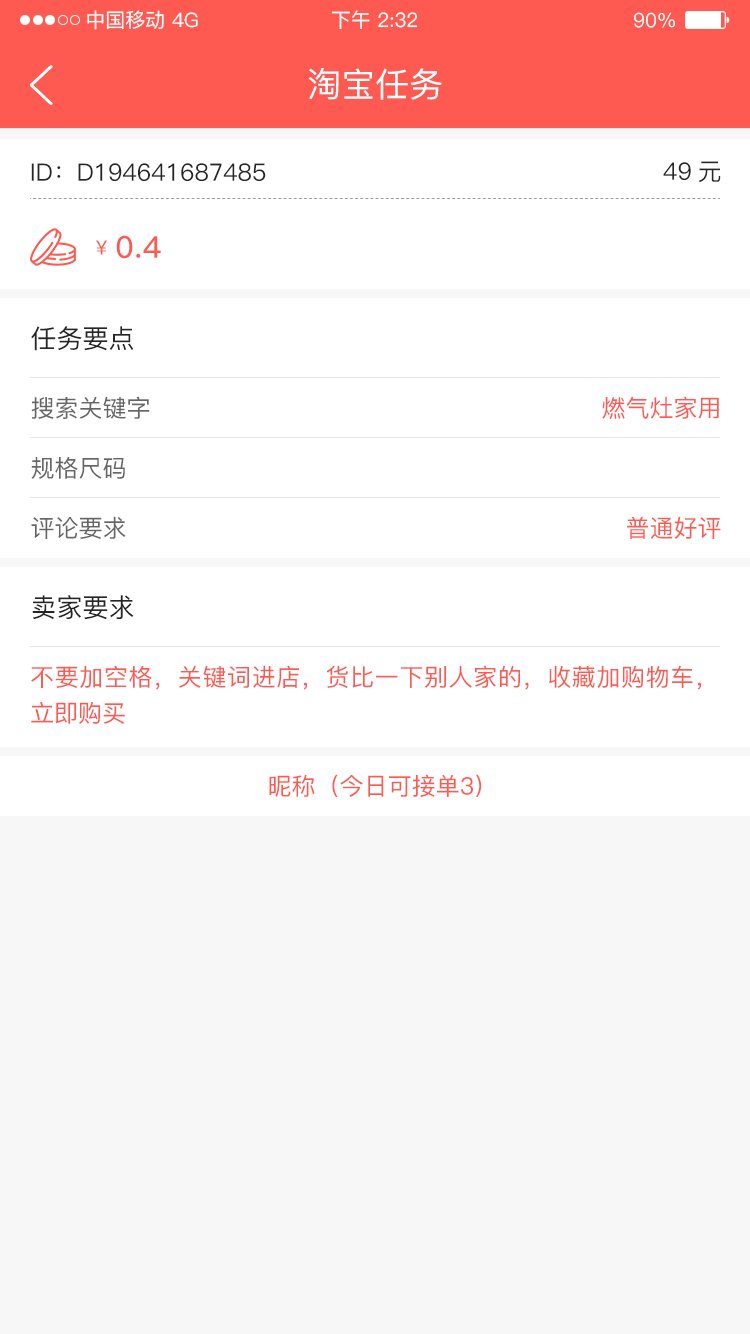
<style>
.page{position:relative;width:750px;height:1334px;background:#ffffff}
.page>*{position:absolute;margin:0}
.t1{font:20px "PingFang-SC-Medium";color:#ffffff}
.t2{font:34px "PingFang-SC-Medium";color:#ffffff}
.t3{font:24px "PingFang-SC-Medium";color:#262626}
.t4{font:19.8px "PingFang-SC-Medium";color:#fe5a51}
.t5{font:29.6px "PingFang-SC-Medium";color:#fe5a51;font-weight:bold}
.t6{font:26px "PingFang-SC-Medium";color:#262626}
.t7{font:24px "PingFang-SC-Medium";color:#666666}
.t8{font:24px "PingFang-SC-Medium";color:#fe5a51}
.t9{font:24px/36px "PingFang-SC-Medium";color:#fe5a51}
</style>
<div class="page">
<p class="t1" style="left:87px;top:10px;width:77px;height:20px">中国移动</p>
<p class="t1" style="left:172px;top:12px;width:26px;height:16px">4G</p>
<p class="t1" style="left:331px;top:10px;width:87px;height:20px">下午 2:32</p>
<p class="t1" style="left:634px;top:12px;width:41px;height:16px">90%</p>
<p class="t2" style="left:308px;top:68px;width:134px;height:32px">淘宝任务</p>
<p class="t3" style="left:663px;top:161px;width:58px;height:22px">49元</p>
<p class="t3" style="left:31px;top:163px;width:235px;height:18px">ID：D194641687485</p>
<p class="t4" style="left:96px;top:240px;width:11px;height:15px">￥</p>
<p class="t5" style="left:116px;top:235px;width:45px;height:24px">0.4</p>
<p class="t6" style="left:31px;top:326px;width:103px;height:25px">任务要点</p>
<p class="t7" style="left:31px;top:396px;width:119px;height:23px">搜索关键字</p>
<p class="t8" style="left:602px;top:396px;width:117px;height:23px">燃气灶家用</p>
<p class="t7" style="left:31px;top:457px;width:94px;height:22px">规格尺码</p>
<p class="t7" style="left:31px;top:516px;width:95px;height:23px">评论要求</p>
<p class="t8" style="left:627px;top:516px;width:94px;height:23px">普通好评</p>
<p class="t6" style="left:32px;top:595px;width:102px;height:25px">卖家要求</p>
<p class="t9" style="left:31px;top:665px;width:670px;height:59px;text-align:justify">不要加空格，关键词进店，货比一下别人家的，收藏加购物车，立即购买</p>
<p class="t8" style="left:269px;top:774px;width:213px;height:23px">昵称（今日可接单3）</p>
</div>
